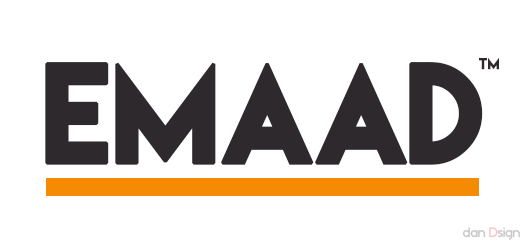
<style>
.page{position:relative;width:524px;height:243px;background:#ffffff}
.page>*{position:absolute;margin:0}
.t1{font:126px "LemonMilk";color:#2d292c;font-weight:bold}
.t2{font:14px "LemonMilk";color:#2d292c;font-weight:bold}
.t3{font:14px "BlissfulThinking";color:#c8c8c8}
</style>
<div class="page">
<p class="t1" style="left:45px;top:62px;width:438px;height:103px">EMAAD</p>
<p class="t2" style="left:479px;top:58px;width:20px;height:12px">tm</p>
<p class="t3" style="left:462px;top:227px;width:58px;height:13px">dan Dsign</p>
</div>
